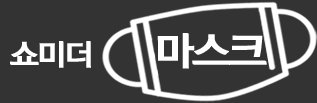
<style>
.page{position:relative;width:317px;height:103px;background:#333333}
.page>*{position:absolute;margin:0}
.t1{font:30px "NYJGothicB";letter-spacing:-0.108em;color:#ffffff;text-transform:uppercase;font-weight:bold}
.t2{font:40px "NYJGothicB";letter-spacing:-0.108em;color:#ffffff;text-transform:uppercase;font-weight:bold}
</style>
<div class="page">
<p class="t1" style="left:10px;top:33px;width:257px;height:36px">쇼미더               <span class="t2">마스크</span></p>
</div>
